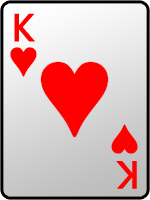
<style>
.page{position:relative;width:150px;height:200px}
.page>*{position:absolute;margin:0}
.t1{font:36px "MicrosoftYaHei";color:#ff0000;font-weight:bold}
</style>
<div class="page">
<p class="t1" style="left:14px;top:13px;width:21px;height:29px">K</p>
<p class="t1" style="left:116px;top:161px;width:21px;height:28px;rotate:-180deg">K</p>
</div>
